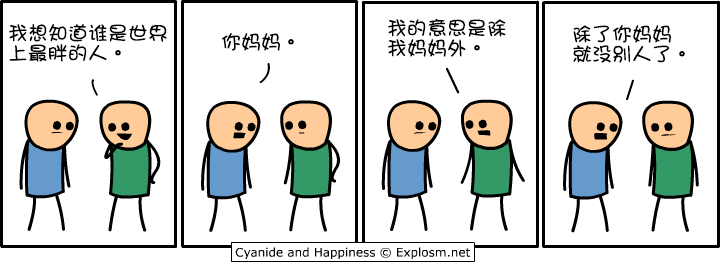
<style>
.page{position:relative;width:721px;height:262px;background:#ffffff}
.page>*{position:absolute;margin:0}
.t1{font:20px/20px "DFGirl";color:#000000}
.t2{font:20px "DFGirl";color:#000000}
</style>
<div class="page">
<p class="t1" style="left:8px;top:23px;width:159px;height:39px">我想知道谁是世界<br>上最胖的人。</p>
<p class="t1" style="left:387px;top:18px;width:119px;height:39px">我的意思是除<br>我妈妈外。</p>
<p class="t1" style="left:573px;top:25px;width:112px;height:38px">除了你妈妈<br>就没别人了。</p>
<p class="t2" style="left:221px;top:33px;width:73px;height:18px">你妈妈。</p>
</div>
